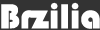
<style>
.page{position:relative;width:100px;height:30px;background:#ffffff}
.page>*{position:absolute;margin:0}
.t1{font:36px "Bauhaus93";color:#ffffff}
</style>
<div class="page">
<p class="t1" style="left:1px;top:2px;width:99px;height:27px">Brzilia</p>
</div>
